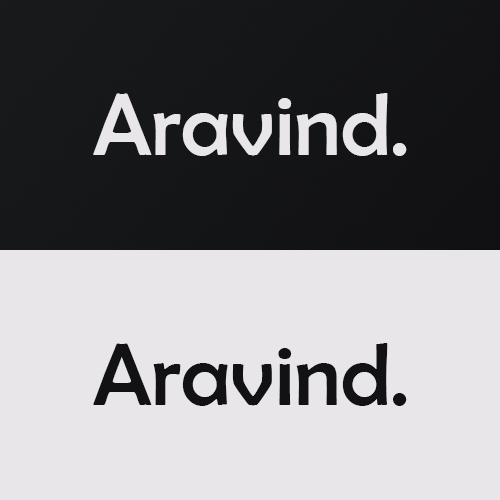
<style>
.page{position:relative;width:500px;height:500px;background:#e8e6e9}
.page>*{position:absolute;margin:0}
.t1{font:88.7px "BerlinSansFB-Reg";color:#e8e6e9}
.t2{font:88.7px "BerlinSansFB-Reg";color:#121214}
</style>
<div class="page">
<p class="t1" style="left:93px;top:93px;width:314px;height:63px">Aravind.</p>
<p class="t2" style="left:93px;top:343px;width:314px;height:63px">Aravind.</p>
</div>
